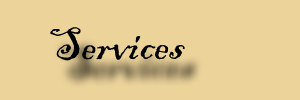
<style>
.page{position:relative;width:300px;height:100px;background:#ecd39a}
.page>*{position:absolute;margin:0}
.t1{font:47.4px "BlackadderITC-Regular";color:#000000}
</style>
<div class="page">
<p class="t1" style="left:48px;top:19px;width:137px;height:58px">Services</p>
</div>
